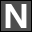
<style>
.page{position:relative;width:32px;height:32px;background:#4d4d4d}
.page>*{position:absolute;margin:0}
.t1{font:32.9px "SegoeUI-Bold";letter-spacing:-0.04em;color:#ffffff}
</style>
<div class="page">
<p class="t1" style="left:5px;top:4px;width:22px;height:24px">N</p>
</div>
